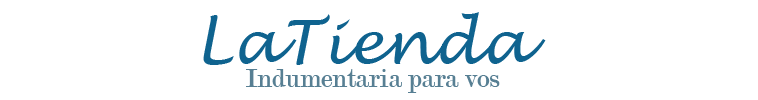
<style>
.page{position:relative;width:758px;height:100px;background:#ffffff}
.page>*{position:absolute;margin:0}
.t1{font:61.1px "LucidaHandwriting-Italic";color:#0f638f}
.t2{font:27.8px "Modern-Regular";color:#577f93}
</style>
<div class="page">
<p class="t1" style="left:203px;top:12px;width:343px;height:53px">LaTienda</p>
<p class="t2" style="left:246px;top:69px;width:254px;height:24px">Indumentaria para vos</p>
</div>
